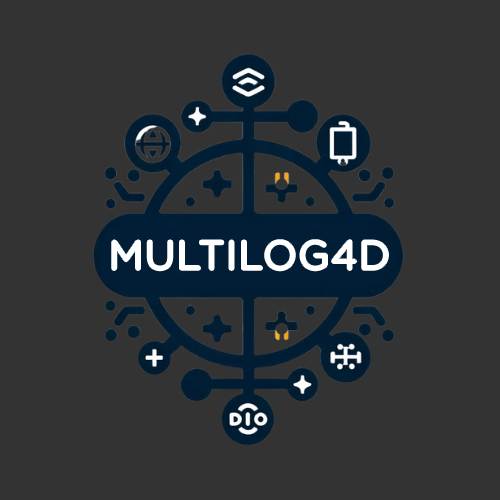
<style>
.page{position:relative;width:500px;height:500px;background:#333333}
.page>*{position:absolute;margin:0}
.t1{font:38.3px "GothamRndSSm-Light";color:#ffffff;font-weight:bold}
</style>
<div class="page">
<p class="t1" style="left:112px;top:240px;width:276px;height:31px">MULTILOG4D</p>
</div>
